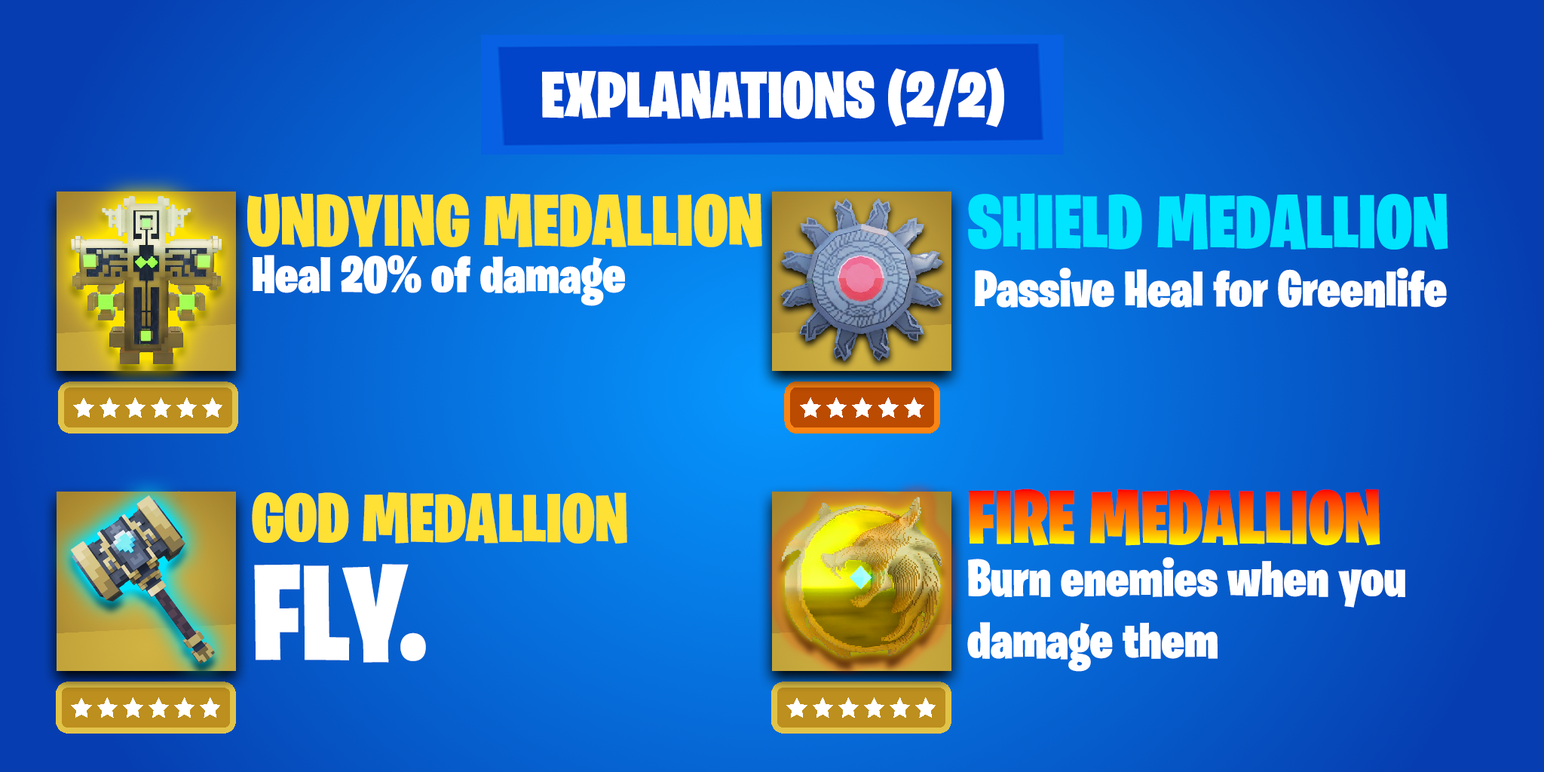
<style>
.page{position:relative;width:1544px;height:772px}
.page>*{position:absolute;margin:0}
.t1{font:65.6px "BurbankBigCondensed-Black";color:#ffffff}
.t2{font:72.8px "BurbankBigCondensed-Black";color:#ffe035}
.t3{font:76.1px "BurbankBigCondensed-Black";color:#00e4ff}
.t4{font:51.5px "BurbankBigCondensed-Black";color:#ffffff}
.t5{font:69.3px "BurbankBigCondensed-Black";color:#ffe035}
.t6{font:76.1px "BurbankBigCondensed-Black"}
.t7{font:137.1px "BurbankBigCondensed-Black";color:#ffffff}
</style>
<div class="page">
<p class="t1" style="left:542px;top:67px;width:462px;height:60px">EXPLANATIONS (2/2)</p>
<p class="t2" style="left:247px;top:193px;width:515px;height:54px">UNDYING MEDALLION</p>
<p class="t3" style="left:968px;top:193px;width:481px;height:57px">SHIELD MEDALLION</p>
<p class="t4" style="left:253px;top:255px;width:372px;height:51px">Heal 20% of damage</p>
<p class="t4" style="left:975px;top:268px;width:472px;height:40px">Passive Heal for Greenlife</p>
<p class="t5" style="left:252px;top:492px;width:375px;height:52px">GOD MEDALLION</p>
<p class="t6" style="left:969px;top:489px;width:412px;height:57px">FIRE MEDALLION</p>
<p class="t4" style="left:967px;top:557px;width:439px;height:115px">Burn enemies when you damage them</p>
<p class="t7" style="left:254px;top:564px;width:172px;height:99px">FLY.</p>
</div>
